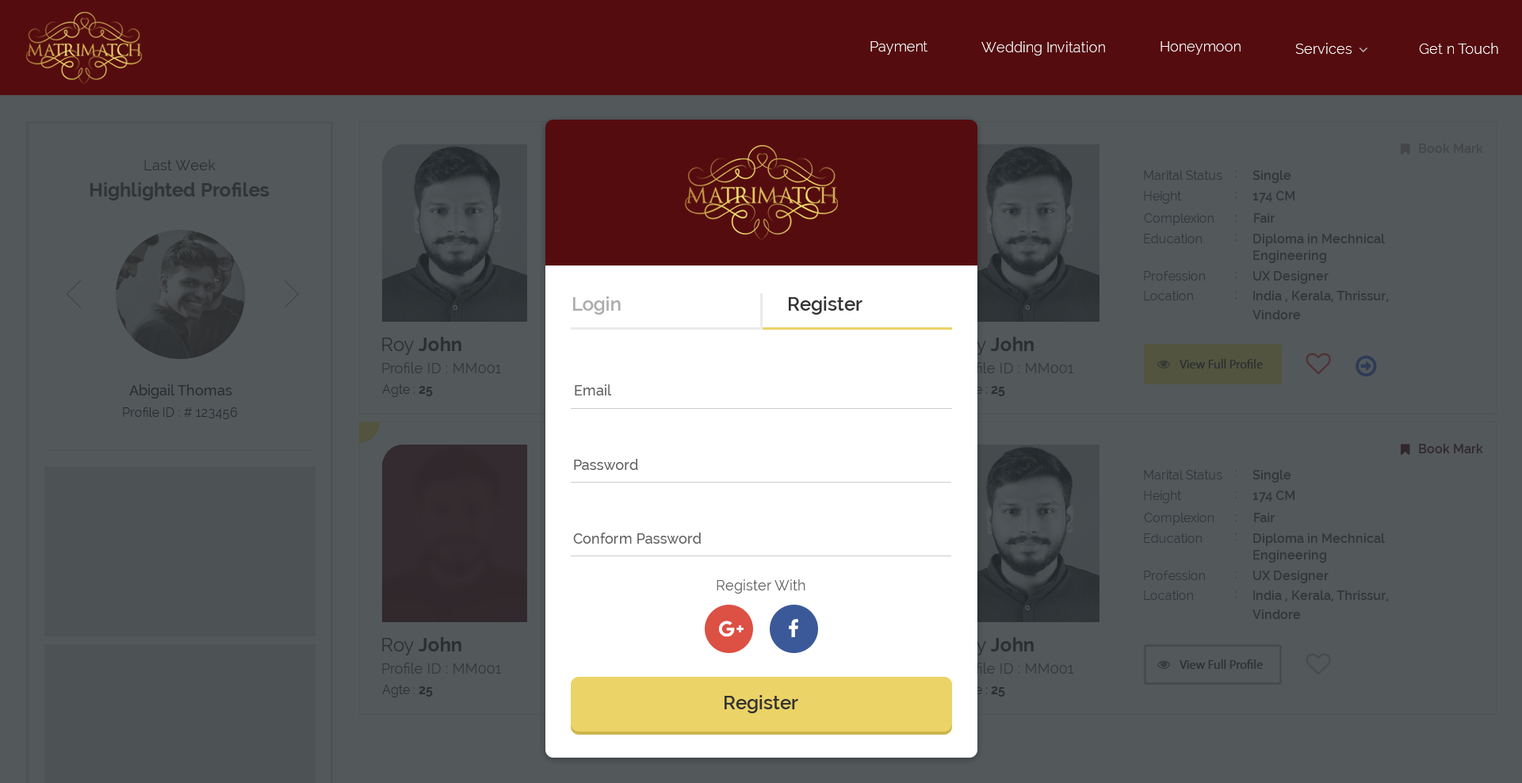
<style>
.page{position:relative;width:1522px;height:783px;background:#53585b}
.page>*{position:absolute;margin:0}
.t1{font:14.3px "Raleway-Light";color:#ffffff}
.t2{font:12.7px "Raleway-SemiBold";color:#444649}
.t3{font:14.3px "Raleway";color:#333333}
.t4{font:12.7px "Raleway";color:#313639}
.t5{font:12.7px "Raleway"}
.t6{font:12.7px "Raleway-SemiBold";color:#313639}
.t7{font:19px "Raleway-Bold";color:#303538}
.t8{font:12.7px/16.6px "Raleway-SemiBold";color:#313639}
.t9{font:12.7px/19px "Raleway-SemiBold";color:#313639}
.t10{font:19px "Raleway-SemiBold";color:#adadad}
.t11{font:19px "Raleway-SemiBold";color:#333333}
.t12{font:19px "Raleway-Bold";color:#333333}
.t13{font:19px "Raleway";color:#333333}
.t14{font:14.3px "Raleway";color:#313639}
.t15{font:12.7px "MyriadPro-Regular";color:#333333}
.t16{font:14.3px "Raleway-Medium";color:#202020}
.t17{font:12.7px "Raleway";color:#333333}
.t18{font:12.7px "Raleway-Bold";color:#333333}
.t19{font:14.3px "Raleway-Medium";color:#606060}
.t20{font:12.7px "Raleway";color:#202020}
.t21{font:12.7px "Raleway-SemiBold";color:#31272b}
.t22{font:14.3px "Raleway";color:#606060}
</style>
<div class="page">
<p class="t1" style="left:871px;top:41px;width:57px;height:14px">Payment</p>
<p class="t1" style="left:982px;top:41px;width:123px;height:14px">Wedding Invitation</p>
<p class="t1" style="left:1161px;top:41px;width:80px;height:14px">Honeymoon</p>
<p class="t1" style="left:1296px;top:43px;width:56px;height:11px">Services</p>
<p class="t1" style="left:1419px;top:43px;width:79px;height:11px">Get n Touch</p>
<p class="t2" style="left:1419px;top:144px;width:64px;height:9px">Book Mark</p>
<p class="t3" style="left:144px;top:159px;width:72px;height:11px">Last Week</p>
<p class="t4" style="left:1144px;top:170px;width:79px;height:10px">Marital Status</p>
<p class="t5" style="left:1236px;top:170px;width:1px;height:8px">:</p>
<p class="t6" style="left:1253px;top:170px;width:39px;height:13px">Single</p>
<p class="t7" style="left:90px;top:182px;width:180px;height:19px">Highlighted Profiles</p>
<p class="t4" style="left:1144px;top:191px;width:38px;height:13px">Height</p>
<p class="t5" style="left:1236px;top:192px;width:1px;height:7px">:</p>
<p class="t6" style="left:1253px;top:191px;width:42px;height:12px">174 CM</p>
<p class="t4" style="left:1144px;top:213px;width:70px;height:13px">Complexion</p>
<p class="t5" style="left:1236px;top:215px;width:1px;height:7px">:</p>
<p class="t6" style="left:1254px;top:213px;width:21px;height:10px">Fair</p>
<p class="t4" style="left:1144px;top:234px;width:58px;height:9px">Education</p>
<p class="t5" style="left:1236px;top:234px;width:1px;height:7px">:</p>
<p class="t8" style="left:1253px;top:234px;width:132px;height:29px">Diploma in Mechnical <br>Engineering</p>
<p class="t4" style="left:1144px;top:271px;width:61px;height:10px">Profession</p>
<p class="t5" style="left:1236px;top:272px;width:1px;height:7px">:</p>
<p class="t6" style="left:1253px;top:271px;width:76px;height:13px">UX Designer</p>
<p class="t4" style="left:1144px;top:291px;width:49px;height:9px">Location</p>
<p class="t5" style="left:1236px;top:292px;width:1px;height:7px">:</p>
<p class="t9" style="left:1253px;top:291px;width:135px;height:29px">India , Kerala, Thrissur,<br>Vindore</p>
<p class="t10" style="left:573px;top:297px;width:48px;height:18px">Login</p>
<p class="t11" style="left:789px;top:297px;width:74px;height:18px">Register</p>
<p class="t12" style="left:382px;top:337px;width:79px;height:18px"><span class="t13">Roy </span>John</p>
<p class="t14" style="left:382px;top:362px;width:119px;height:11px">Profile ID : MM001</p>
<p class="t15" style="left:1180px;top:359px;width:83px;height:10px">View Full Profile</p>
<p class="t16" style="left:129px;top:385px;width:103px;height:14px">Abigail Thomas</p>
<p class="t17" style="left:382px;top:385px;width:51px;height:12px">Agte : <span class="t18">25</span></p>
<p class="t19" style="left:575px;top:385px;width:37px;height:11px">Email</p>
<p class="t20" style="left:123px;top:408px;width:114px;height:11px">Profile ID : # 123456</p>
<p class="t21" style="left:1419px;top:444px;width:64px;height:10px">Book Mark</p>
<p class="t19" style="left:574px;top:459px;width:64px;height:11px">Password</p>
<p class="t4" style="left:1144px;top:470px;width:79px;height:10px">Marital Status</p>
<p class="t5" style="left:1236px;top:470px;width:1px;height:7px">:</p>
<p class="t6" style="left:1253px;top:470px;width:39px;height:13px">Single</p>
<p class="t4" style="left:1144px;top:491px;width:38px;height:12px">Height</p>
<p class="t5" style="left:1236px;top:492px;width:1px;height:7px">:</p>
<p class="t6" style="left:1253px;top:491px;width:42px;height:12px">174 CM</p>
<p class="t4" style="left:1144px;top:513px;width:70px;height:13px">Complexion</p>
<p class="t5" style="left:1236px;top:515px;width:1px;height:7px">:</p>
<p class="t6" style="left:1254px;top:513px;width:21px;height:9px">Fair</p>
<p class="t19" style="left:573px;top:533px;width:129px;height:11px">Conform Password</p>
<p class="t4" style="left:1144px;top:534px;width:58px;height:9px">Education</p>
<p class="t5" style="left:1236px;top:534px;width:1px;height:7px">:</p>
<p class="t8" style="left:1253px;top:534px;width:132px;height:29px">Diploma in Mechnical <br>Engineering</p>
<p class="t22" style="left:717px;top:580px;width:89px;height:14px">Register With</p>
<p class="t4" style="left:1144px;top:571px;width:61px;height:9px">Profession</p>
<p class="t5" style="left:1236px;top:572px;width:1px;height:7px">:</p>
<p class="t6" style="left:1253px;top:571px;width:76px;height:13px">UX Designer</p>
<p class="t4" style="left:1144px;top:591px;width:49px;height:9px">Location</p>
<p class="t5" style="left:1236px;top:591px;width:1px;height:8px">:</p>
<p class="t9" style="left:1253px;top:591px;width:135px;height:28px">India , Kerala, Thrissur,<br>Vindore</p>
<p class="t12" style="left:382px;top:637px;width:79px;height:19px"><span class="t13">Roy </span>John</p>
<p class="t14" style="left:382px;top:663px;width:119px;height:11px">Profile ID : MM001</p>
<p class="t15" style="left:1180px;top:660px;width:83px;height:9px">View Full Profile</p>
<p class="t17" style="left:382px;top:685px;width:51px;height:13px">Agte : <span class="t18">25</span></p>
<p class="t11" style="left:725px;top:695px;width:73px;height:19px">Register</p>
</div>
